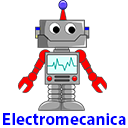
<style>
.page{position:relative;width:128px;height:128px;background:#ffffff}
.page>*{position:absolute;margin:0}
.t1{font:17px "MyriadPro-Bold";color:#0000ff}
</style>
<div class="page">
<p class="t1" style="left:3px;top:113px;width:123px;height:12px">Electromecanica</p>
</div>
